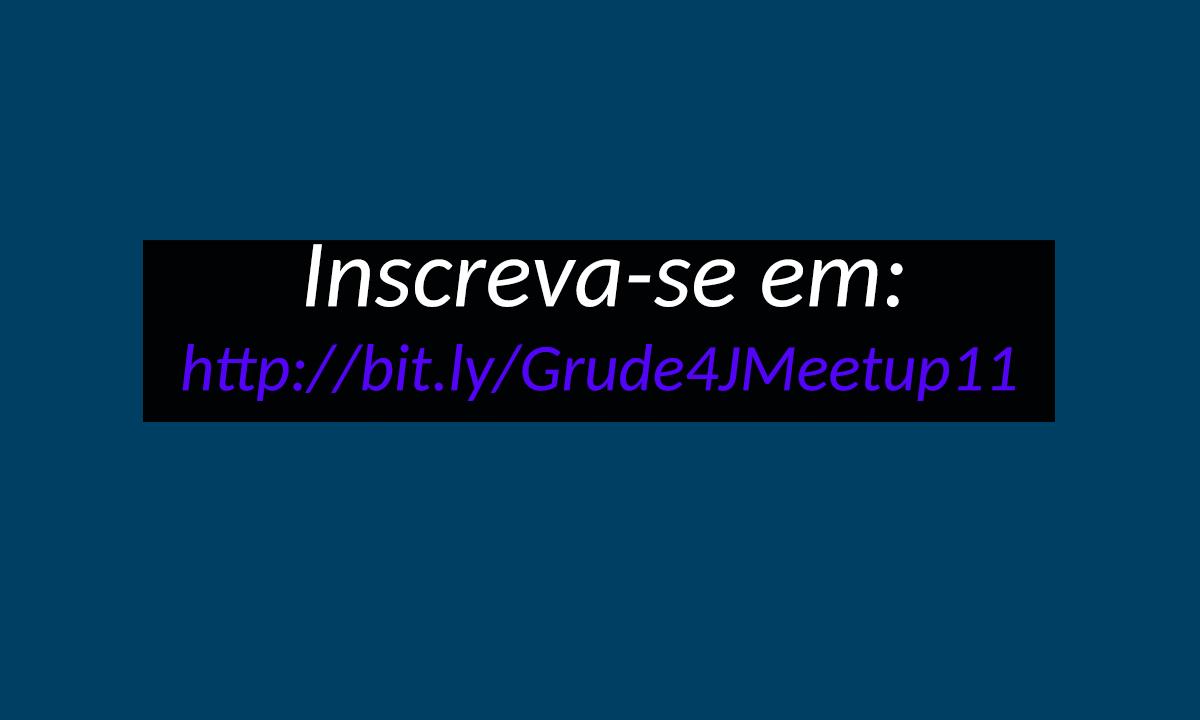
<style>
.page{position:relative;width:1200px;height:720px;background:#003f64}
.page>*{position:absolute;margin:0}
.t1{font:96.8px "Carlito-Italic";color:#ffffff}
.t2{font:66.7px "Carlito-Italic";color:#5303f6}
</style>
<div class="page">
<p class="t1" style="left:306px;top:244px;width:597px;height:63px">Inscreva-se em:</p>
<p class="t2" style="left:182px;top:344px;width:833px;height:57px">http://bit.ly/Grude4JMeetup11</p>
</div>
